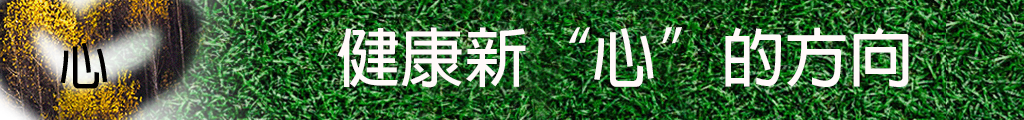
<style>
.page{position:relative;width:1024px;height:120px}
.page>*{position:absolute;margin:0}
.t1{font:64.2px "AdobeFanHeitiStd-Bold";color:#fff9f9}
.t2{font:50px "AdobeFanHeitiStd-Bold";color:#000000}
</style>
<div class="page">
<p class="t1" style="left:337px;top:27px;width:572px;height:61px">健康新“心”的方向</p>
<p class="t2" style="left:60px;top:42px;width:48px;height:47px">心</p>
</div>
